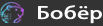
<style>
.page{position:relative;width:103px;height:26px;background:#333333}
.page>*{position:absolute;margin:0}
.t1{font:18.7px "MyriadPro-Regular";color:#ffffff;font-weight:bold;scale:1.26 1}
</style>
<div class="page">
<p class="t1" style="left:38px;top:5px;width:64px;height:19px">Бобёр</p>
</div>
